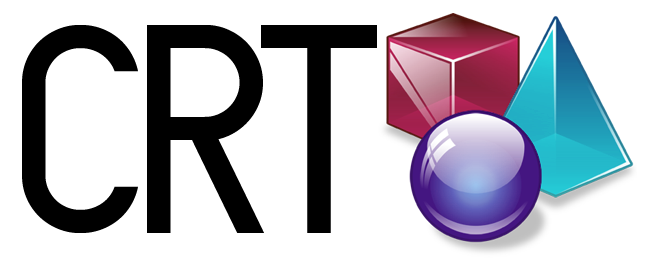
<style>
.page{position:relative;width:654px;height:258px;background:#ffffff}
.page>*{position:absolute;margin:0}
.t1{font:300px "EnvyCodeR";letter-spacing:-0.12em;color:#000000}
.t2{font:300px "EnvyCodeR";letter-spacing:-0.16em;color:#000000}
</style>
<div class="page">
<p class="t1" style="left:22px;top:25px;width:355px;height:208px">C<span class="t2">R</span>T</p>
</div>
